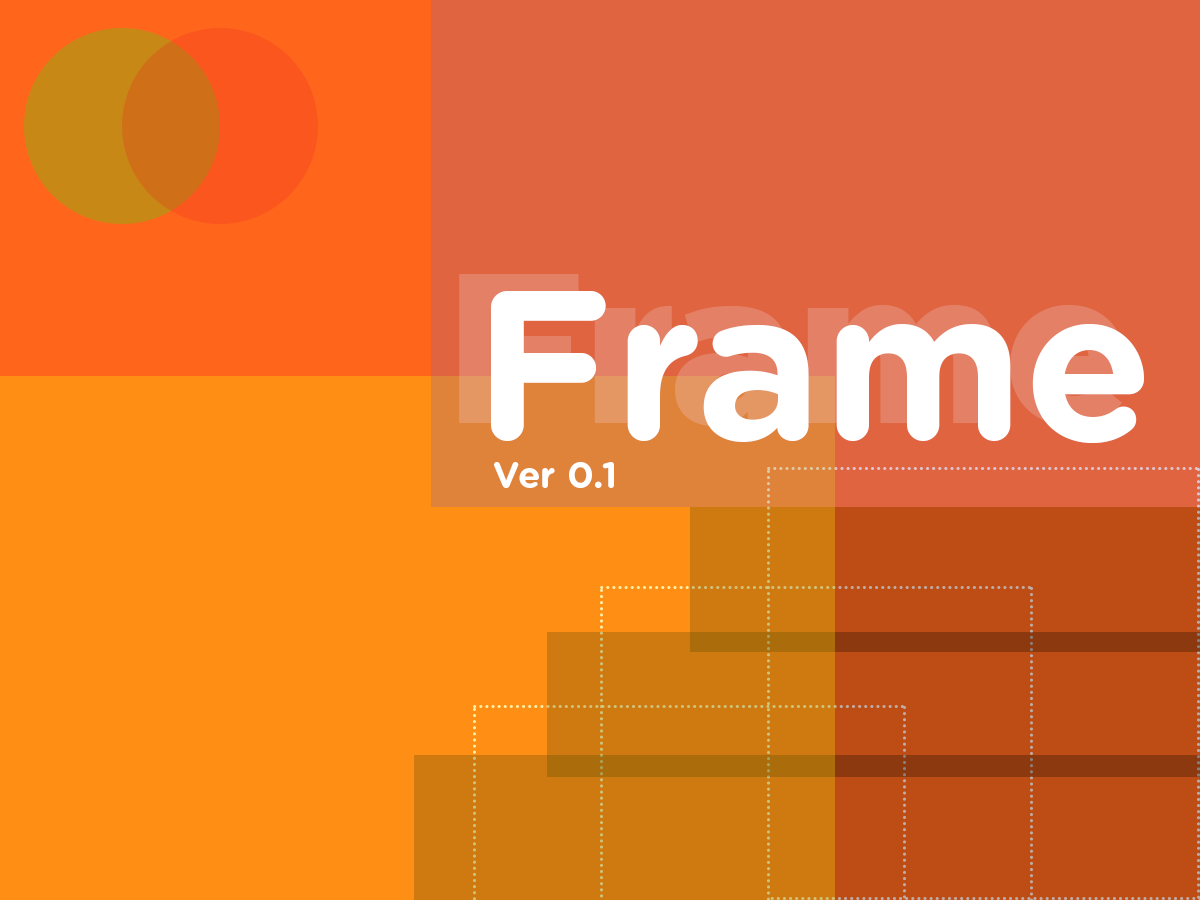
<style>
.page{position:relative;width:1200px;height:900px;background:#df643f}
.page>*{position:absolute;margin:0}
.t1{font:212.6px "GothamRounded-Bold";color:#ffffff}
.t2{font:37.1px "GothamRounded-Bold";color:#ffffff}
</style>
<div class="page">
<p class="t1" style="left:491px;top:291px;width:653px;height:152px">Frame</p>
<p class="t2" style="left:494px;top:462px;width:120px;height:26px">Ver 0.1</p>
</div>
